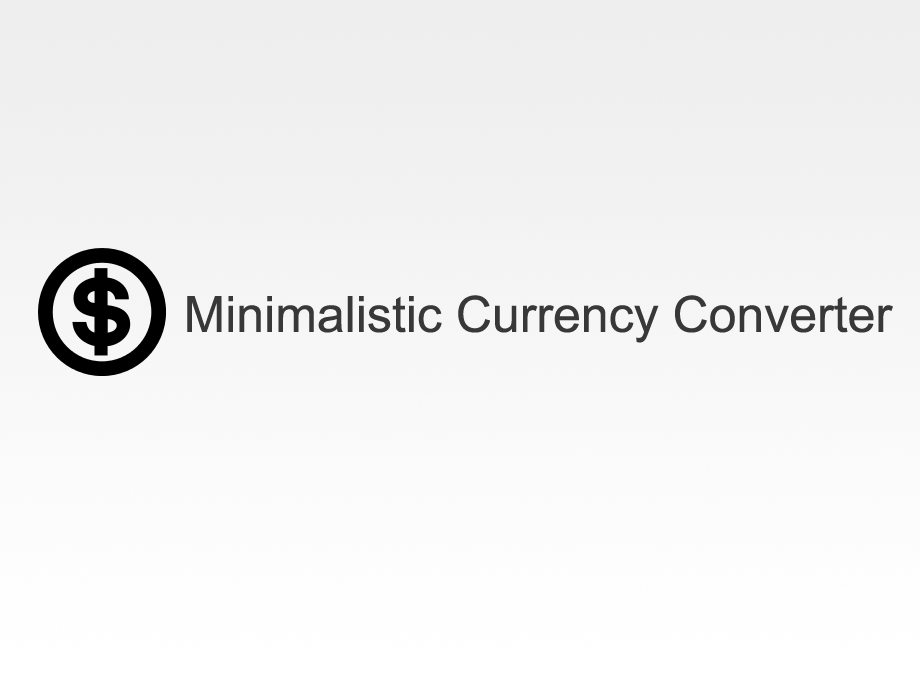
<style>
.page{position:relative;width:920px;height:680px}
.page>*{position:absolute;margin:0}
.t1{font:50px "ArialMT";color:#383838}
</style>
<div class="page">
<p class="t1" style="left:187px;top:295px;width:706px;height:48px">Minimalistic Currency Converter</p>
</div>
